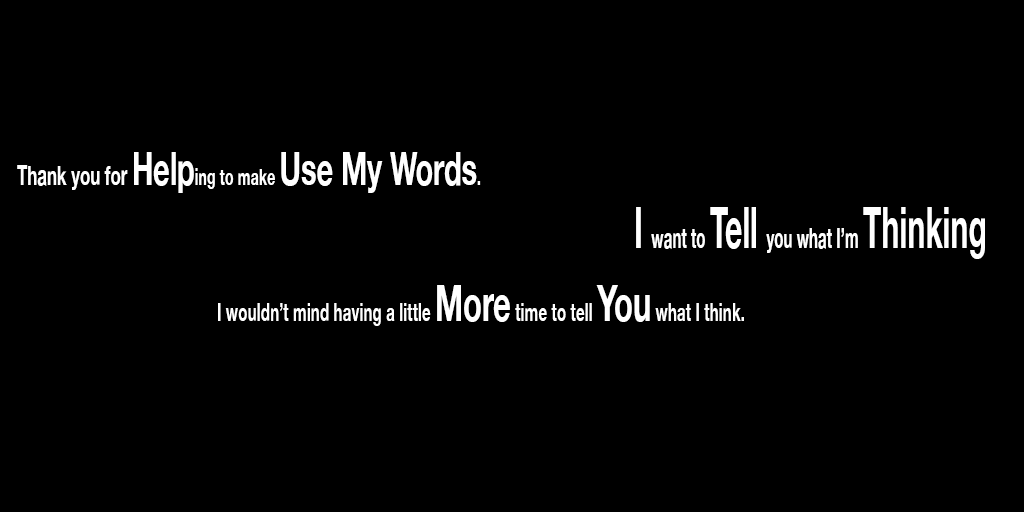
<style>
.page{position:relative;width:1024px;height:512px;background:#000000}
.page>*{position:absolute;margin:0}
.t1{font:26.6px "HelveticaNeue-Bold";color:#ffffff;scale:0.63 1}
.t2{font:45.6px "HelveticaNeue-Bold";color:#ffffff;scale:0.63 1}
.t3{font:22.8px "HelveticaNeue-Bold";color:#ffffff;scale:0.63 1}
.t4{font:28.4px "HelveticaNeue-Bold";color:#ffffff;scale:0.53 1}
.t5{font:56.8px "HelveticaNeue-Bold";color:#ffffff;scale:0.53 1}
.t6{font:25px "HelveticaNeue-Bold";color:#ffffff;scale:0.61 1}
.t7{font:50.1px "HelveticaNeue-Bold";color:#ffffff;scale:0.61 1}
</style>
<div class="page">
<p class="t1" style="left:17px;top:152px;width:464px;height:41px">Thank you for <span class="t2">Help</span><span class="t3">ing to make </span><span class="t2">Use My Words</span><span class="t3">.</span></p>
<p class="t4" style="left:636px;top:207px;width:349px;height:52px"><span class="t5">I </span>want to <span class="t5">Tell </span>you what I’m <span class="t5">Thinking</span></p>
<p class="t6" style="left:218px;top:285px;width:526px;height:41px">I wouldn’t mind having a little <span class="t7">More</span> time to tell <span class="t7">You</span> what I think.</p>
</div>
